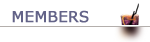
<style>
.page{position:relative;width:150px;height:42px;background:#ffffff}
.page>*{position:absolute;margin:0}
.t1{font:15px "Verdana";color:#636388;font-weight:bold}
</style>
<div class="page">
<p class="t1" style="left:12px;top:10px;width:77px;height:13px">MEMBERS</p>
</div>
